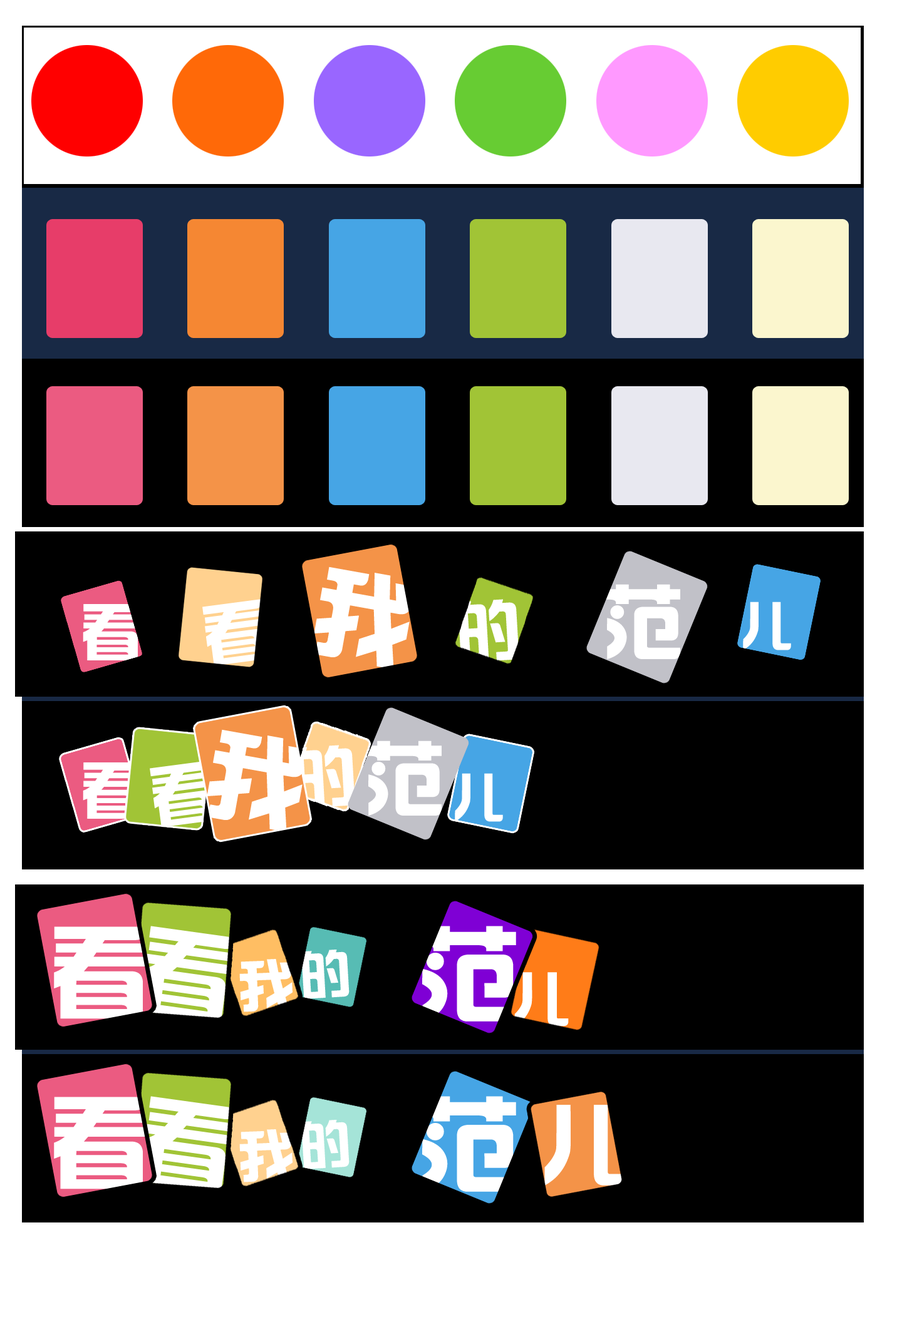
<style>
.page{position:relative;width:902px;height:1322px;background:#000000}
.page>*{position:absolute;margin:0}
.t1{font:99.4px "hzgb";color:#ffffff}
.t2{font:80.8px "hzgb";color:#ffffff}
.t3{font:62px "hzgb";color:#ffffff}
.t4{font:65.7px "hzgb";color:#ffffff}
.t5{font:52px "hzgb";color:#ffffff}
.t6{font:100.8px "hzgb";color:#ffffff}
.t7{font:94.2px "hzgb";color:#ffffff}
.t8{font:103.3px "hzgb";color:#ffffff}
.t9{font:51.5px "hzgb";color:#ffffff}
.t10{font:56.5px "hzgb";color:#ffffff}
.t11{font:58.2px "hzgb";color:#ffffff}
.t12{font:87.1px "hzgb";color:#ffffff}
</style>
<div class="page">
<p class="t1" style="left:314px;top:567px;width:97px;height:102px;rotate:10deg">我</p>
<p class="t2" style="left:606px;top:584px;width:74px;height:75px">范</p>
<p class="t3" style="left:83px;top:604px;width:57px;height:57px">看</p>
<p class="t4" style="left:202px;top:599px;width:65px;height:67px;rotate:-8deg">看</p>
<p class="t4" style="left:455px;top:599px;width:64px;height:64px;rotate:-3deg">的</p>
<p class="t5" style="left:743px;top:602px;width:48px;height:49px">儿</p>
<p class="t1" style="left:207px;top:729px;width:97px;height:103px;rotate:10deg">我</p>
<p class="t4" style="left:291px;top:745px;width:64px;height:64px;rotate:-3deg">的</p>
<p class="t2" style="left:367px;top:741px;width:74px;height:75px">范</p>
<p class="t4" style="left:150px;top:761px;width:65px;height:67px;rotate:-8deg">看</p>
<p class="t3" style="left:83px;top:763px;width:57px;height:56px">看</p>
<p class="t5" style="left:455px;top:773px;width:48px;height:49px">儿</p>
<p class="t6" style="left:54px;top:927px;width:92px;height:92px">看</p>
<p class="t7" style="left:142px;top:926px;width:92px;height:97px;rotate:8deg">看</p>
<p class="t8" style="left:420px;top:926px;width:96px;height:96px">范</p>
<p class="t9" style="left:299px;top:950px;width:50px;height:49px;rotate:-3deg">的</p>
<p class="t10" style="left:239px;top:959px;width:53px;height:54px;rotate:-2deg">我</p>
<p class="t11" style="left:514px;top:972px;width:55px;height:55px">儿</p>
<p class="t6" style="left:54px;top:1097px;width:92px;height:93px">看</p>
<p class="t7" style="left:142px;top:1096px;width:92px;height:97px;rotate:8deg">看</p>
<p class="t8" style="left:420px;top:1096px;width:96px;height:96px">范</p>
<p class="t12" style="left:544px;top:1105px;width:81px;height:81px">儿</p>
<p class="t9" style="left:299px;top:1120px;width:50px;height:50px;rotate:-3deg">的</p>
<p class="t10" style="left:239px;top:1130px;width:53px;height:53px;rotate:-2deg">我</p>
</div>
